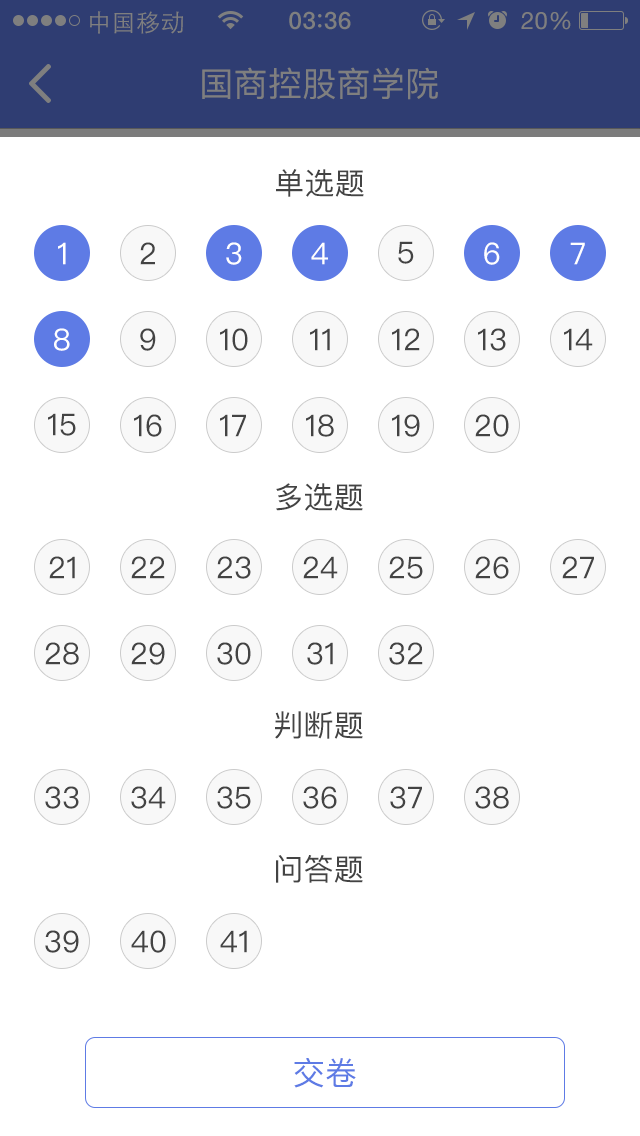
<style>
.page{position:relative;width:640px;height:1136px;background:#ffffff}
.page>*{position:absolute;margin:0}
.t1{font:30px "PingFangSC-Regular";letter-spacing:0.01em;color:#434343}
.t2{font:30px "PingFangSC-Regular";letter-spacing:0.01em;color:#ffffff}
.t3{font:32px "PingFangSC-Regular";letter-spacing:0.01em;color:#5e7be5}
</style>
<div class="page">
<p class="t1" style="left:276px;top:169px;width:88px;height:28px">单选题</p>
<p class="t2" style="left:58px;top:242px;width:8px;height:23px">1</p>
<p class="t1" style="left:140px;top:242px;width:15px;height:23px">2</p>
<p class="t2" style="left:226px;top:242px;width:16px;height:23px">3</p>
<p class="t2" style="left:311px;top:242px;width:17px;height:23px">4</p>
<p class="t1" style="left:398px;top:241px;width:16px;height:23px">5</p>
<p class="t2" style="left:484px;top:242px;width:16px;height:23px">6</p>
<p class="t2" style="left:570px;top:242px;width:15px;height:23px">7</p>
<p class="t2" style="left:54px;top:328px;width:16px;height:23px">8</p>
<p class="t1" style="left:140px;top:328px;width:16px;height:23px">9</p>
<p class="t1" style="left:220px;top:328px;width:28px;height:23px">10</p>
<p class="t1" style="left:310px;top:328px;width:20px;height:23px">11</p>
<p class="t1" style="left:392px;top:328px;width:28px;height:23px">12</p>
<p class="t1" style="left:478px;top:328px;width:28px;height:23px">13</p>
<p class="t1" style="left:564px;top:328px;width:29px;height:23px">14</p>
<p class="t1" style="left:48px;top:413px;width:28px;height:23px">15</p>
<p class="t1" style="left:134px;top:414px;width:28px;height:23px">16</p>
<p class="t1" style="left:220px;top:414px;width:26px;height:23px">17</p>
<p class="t1" style="left:306px;top:414px;width:28px;height:23px">18</p>
<p class="t1" style="left:392px;top:414px;width:28px;height:23px">19</p>
<p class="t1" style="left:475px;top:414px;width:34px;height:23px">20</p>
<p class="t1" style="left:276px;top:483px;width:87px;height:28px">多选题</p>
<p class="t1" style="left:49px;top:556px;width:26px;height:23px">21</p>
<p class="t1" style="left:131px;top:556px;width:34px;height:23px">22</p>
<p class="t1" style="left:217px;top:556px;width:34px;height:23px">23</p>
<p class="t1" style="left:303px;top:556px;width:35px;height:23px">24</p>
<p class="t1" style="left:389px;top:556px;width:34px;height:23px">25</p>
<p class="t1" style="left:475px;top:556px;width:34px;height:23px">26</p>
<p class="t1" style="left:562px;top:556px;width:32px;height:23px">27</p>
<p class="t1" style="left:45px;top:642px;width:34px;height:23px">28</p>
<p class="t1" style="left:131px;top:642px;width:34px;height:23px">29</p>
<p class="t1" style="left:217px;top:642px;width:34px;height:23px">30</p>
<p class="t1" style="left:307px;top:642px;width:26px;height:23px">31</p>
<p class="t1" style="left:389px;top:642px;width:34px;height:23px">32</p>
<p class="t1" style="left:275px;top:711px;width:88px;height:28px">判断题</p>
<p class="t1" style="left:45px;top:786px;width:34px;height:23px">33</p>
<p class="t1" style="left:131px;top:786px;width:35px;height:23px">34</p>
<p class="t1" style="left:217px;top:786px;width:34px;height:23px">35</p>
<p class="t1" style="left:303px;top:786px;width:34px;height:23px">36</p>
<p class="t1" style="left:390px;top:786px;width:32px;height:23px">37</p>
<p class="t1" style="left:475px;top:786px;width:34px;height:23px">38</p>
<p class="t1" style="left:276px;top:855px;width:87px;height:28px">问答题</p>
<p class="t1" style="left:45px;top:930px;width:34px;height:23px">39</p>
<p class="t1" style="left:131px;top:930px;width:35px;height:23px">40</p>
<p class="t1" style="left:220px;top:930px;width:27px;height:23px">41</p>
<p class="t3" style="left:294px;top:1058px;width:62px;height:30px">交卷</p>
</div>
